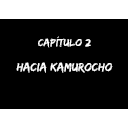
<style>
.page{position:relative;width:128px;height:128px;background:#000000}
.page>*{position:absolute;margin:0}
.t1{font:10.7px "EdoSZ";color:#ffffff;scale:1.05 1}
.t2{font:12.3px "EdoSZ";color:#ffffff}
</style>
<div class="page">
<p class="t1" style="left:38px;top:36px;width:53px;height:12px">Capítulo 2</p>
<p class="t2" style="left:16px;top:62px;width:97px;height:11px">hacia kamurocho</p>
</div>
